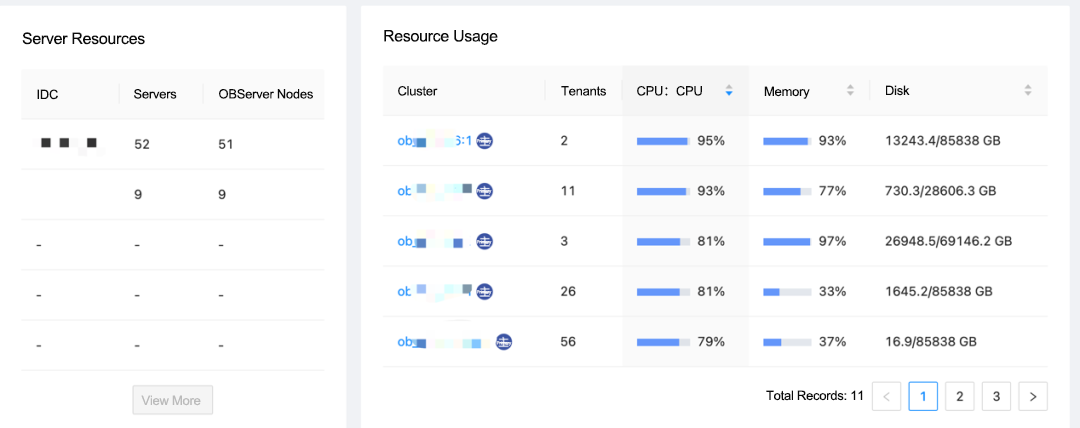
<style>
.page{position:relative;width:1080px;height:428px;background:#ffffff}
.page>*{position:absolute;margin:0}
.t1{font:16px "ArialMT";letter-spacing:-0.02em;color:#0b0b0b}
.t2{font:13px "ArialMT";letter-spacing:-0.02em;color:#0b0b0b}
.t3{font:13px "AdobeHeitiStd-Regular";letter-spacing:-0.02em;color:#0b0b0b}
.t4{font:4.5px "ArialMT";letter-spacing:-0.03em;color:#fefefe}
.t5{font:13px "ArialMT";letter-spacing:-0.02em;color:#bbbbbb}
</style>
<div class="page">
<p class="t1" style="left:384px;top:30px;width:114px;height:15px">Resource Usage</p>
<p class="t1" style="left:22px;top:32px;width:123px;height:13px">Server Resources</p>
<p class="t2" style="left:37px;top:89px;width:21px;height:11px">IDC</p>
<p class="t2" style="left:134px;top:89px;width:43px;height:10px">Servers</p>
<p class="t2" style="left:219px;top:89px;width:94px;height:10px">OBServer Nodes</p>
<p class="t2" style="left:398px;top:86px;width:40px;height:10px">Cluster</p>
<p class="t2" style="left:561px;top:86px;width:45px;height:10px">Tenants</p>
<p class="t2" style="left:637px;top:86px;width:65px;height:10px">CPU<span class="t3">：</span>CPU</p>
<p class="t2" style="left:764px;top:86px;width:46px;height:13px">Memory</p>
<p class="t2" style="left:886px;top:85px;width:24px;height:11px">Disk</p>
<p class="t4" style="left:476px;top:139px;width:16px;height:5px">Primary</p>
<p class="t4" style="left:476px;top:189px;width:16px;height:5px">Primary</p>
<p class="t4" style="left:476px;top:240px;width:16px;height:5px">Primary</p>
<p class="t4" style="left:476px;top:290px;width:16px;height:5px">Primary</p>
<p class="t4" style="left:496px;top:341px;width:16px;height:5px">Primary</p>
<p class="t2" style="left:766px;top:390px;width:97px;height:11px">Total Records: 11</p>
<p class="t5" style="left:141px;top:395px;width:60px;height:11px">View More</p>
</div>
